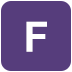
<style>
.page{position:relative;width:72px;height:72px;background:#563d7c}
.page>*{position:absolute;margin:0}
.t1{font:41.7px "Arial-BoldMT";color:#ffffff}
</style>
<div class="page">
<p class="t1" style="left:26px;top:21px;width:21px;height:31px">F</p>
</div>
